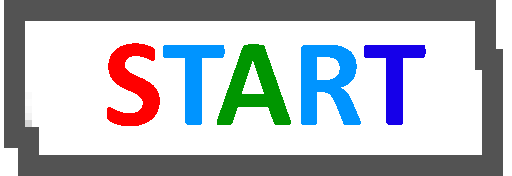
<style>
.page{position:relative;width:512px;height:176px;background:#ffffff}
.page>*{position:absolute;margin:0}
.t1{font:127.4px "Calibri-Bold";color:#ff0000}
.t2{font:127.4px "Calibri-Bold";color:#0094ff}
.t3{font:127.4px "Calibri-Bold";color:#009600}
.t4{font:127.4px "Calibri-Bold";color:#1600e9}
</style>
<div class="page">
<p class="t1" style="left:107px;top:43px;width:319px;height:83px">S<span class="t2">T</span><span class="t3">A</span><span class="t2">R</span><span class="t4">T</span></p>
</div>
